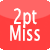
<style>
.page{position:relative;width:50px;height:50px;background:#ff3e3e}
.page>*{position:absolute;margin:0}
.t1{font:21px "LucidaSansUnicode";color:#fffffd;scale:0.7 1}
</style>
<div class="page">
<p class="t1" style="left:10px;top:8px;width:30px;height:33px">2pt Miss</p>
</div>
